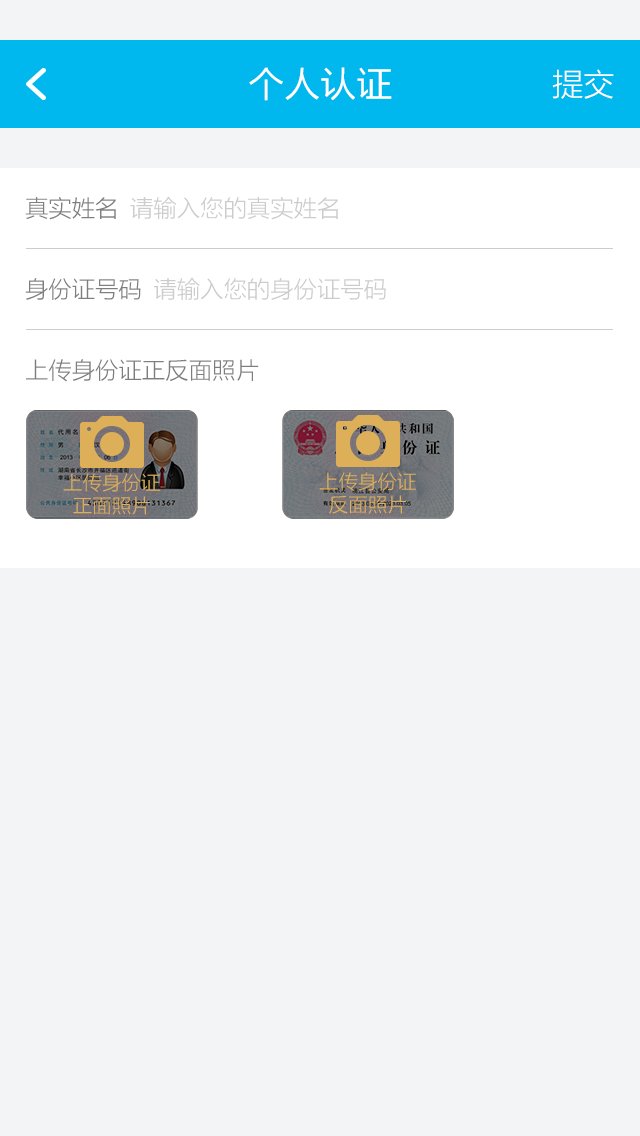
<style>
.page{position:relative;width:640px;height:1136px;background:#f3f4f5}
.page>*{position:absolute;margin:0}
.t1{font:36px "FZLTXHKM";letter-spacing:-0.025em;color:#ffffff;font-weight:bold}
.t2{font:32px "FZLTXHKM";letter-spacing:-0.025em;color:#ffffff}
.t3{font:24px "FZLTXHKM";letter-spacing:-0.025em;color:#cccccc}
.t4{font:24px "FZLTXHKM";letter-spacing:-0.025em;color:#7e7e7e}
.t5{font:20px/18px "FZLTXHKM";letter-spacing:-0.025em;color:#ddaf59}
</style>
<div class="page">
<p class="t1" style="left:249px;top:67px;width:143px;height:34px">个人认证</p>
<p class="t2" style="left:552px;top:69px;width:62px;height:30px">提交</p>
<p class="t3" style="left:25px;top:196px;width:313px;height:24px"><span class="t4">真实姓名 </span>请输入您的真实姓名</p>
<p class="t3" style="left:25px;top:277px;width:361px;height:23px"><span class="t4">身份证号码 </span>请输入您的身份证号码</p>
<p class="t4" style="left:26px;top:359px;width:233px;height:23px">上传身份证正反面照片</p>
<p class="t5" style="left:63px;top:473px;width:97px;height:42px;text-align:center">上传身份证<br>正面照片</p>
<p class="t5" style="left:319px;top:472px;width:97px;height:42px;text-align:center">上传身份证<br>反面照片</p>
</div>
